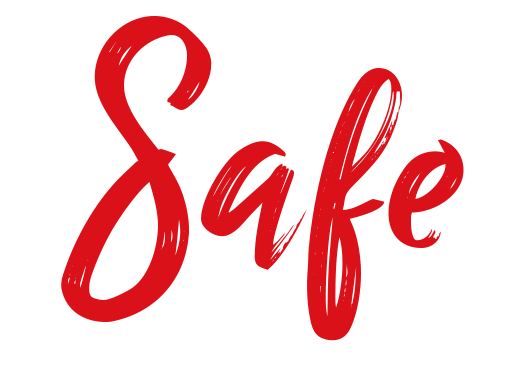
<style>
.page{position:relative;width:519px;height:389px;background:#ffffff}
.page>*{position:absolute;margin:0}
.t1{font:340.2px "BillyOhio";color:#db1119}
</style>
<div class="page">
<p class="t1" style="left:61px;top:16px;width:403px;height:325px">Safe</p>
</div>
